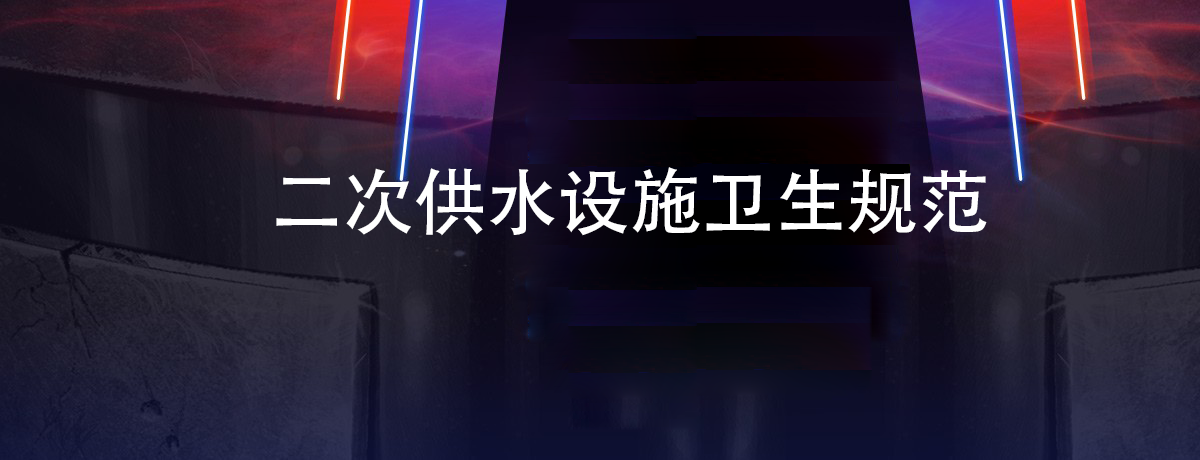
<style>
.page{position:relative;width:1200px;height:460px}
.page>*{position:absolute;margin:0}
.t1{font:72px "AdobeHeitiStd-Regular";color:#ffffff}
</style>
<div class="page">
<p class="t1" style="left:276px;top:167px;width:711px;height:69px">二次供水设施卫生规范</p>
</div>
